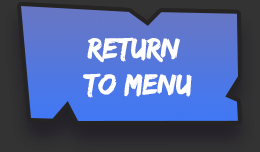
<style>
.page{position:relative;width:260px;height:152px}
.page>*{position:absolute;margin:0}
.t1{font:30px "EdoSZ";color:#ffffff}
</style>
<div class="page">
<p class="t1" style="left:83px;top:37px;width:109px;height:61px;text-align:center">return <br>to menu</p>
</div>
